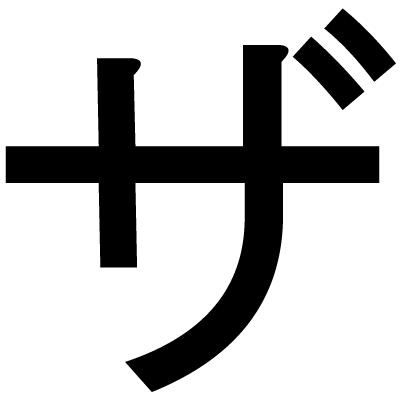
<style>
.page{position:relative;width:400px;height:400px;background:#ffffff}
.page>*{position:absolute;margin:0}
.t1{font:424.8px "MS-PGothic";color:#000000}
</style>
<div class="page">
<p class="t1" style="left:5px;top:8px;width:391px;height:384px">ザ</p>
</div>
